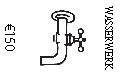
<style>
.page{position:relative;width:124px;height:76px;background:#ffffff}
.page>*{position:absolute;margin:0}
.t1{font:12px "AdobeDevanagari-Regular";color:#000000;scale:0.9 1}
.t2{font:14px "MyriadPro-Regular";color:#000000}
</style>
<div class="page">
<p class="t1" style="left:105px;top:6px;width:8px;height:64px;rotate:90deg">WASSERWERK</p>
<p class="t2" style="left:5px;top:24px;width:10px;height:27px;rotate:90deg">€150</p>
</div>
